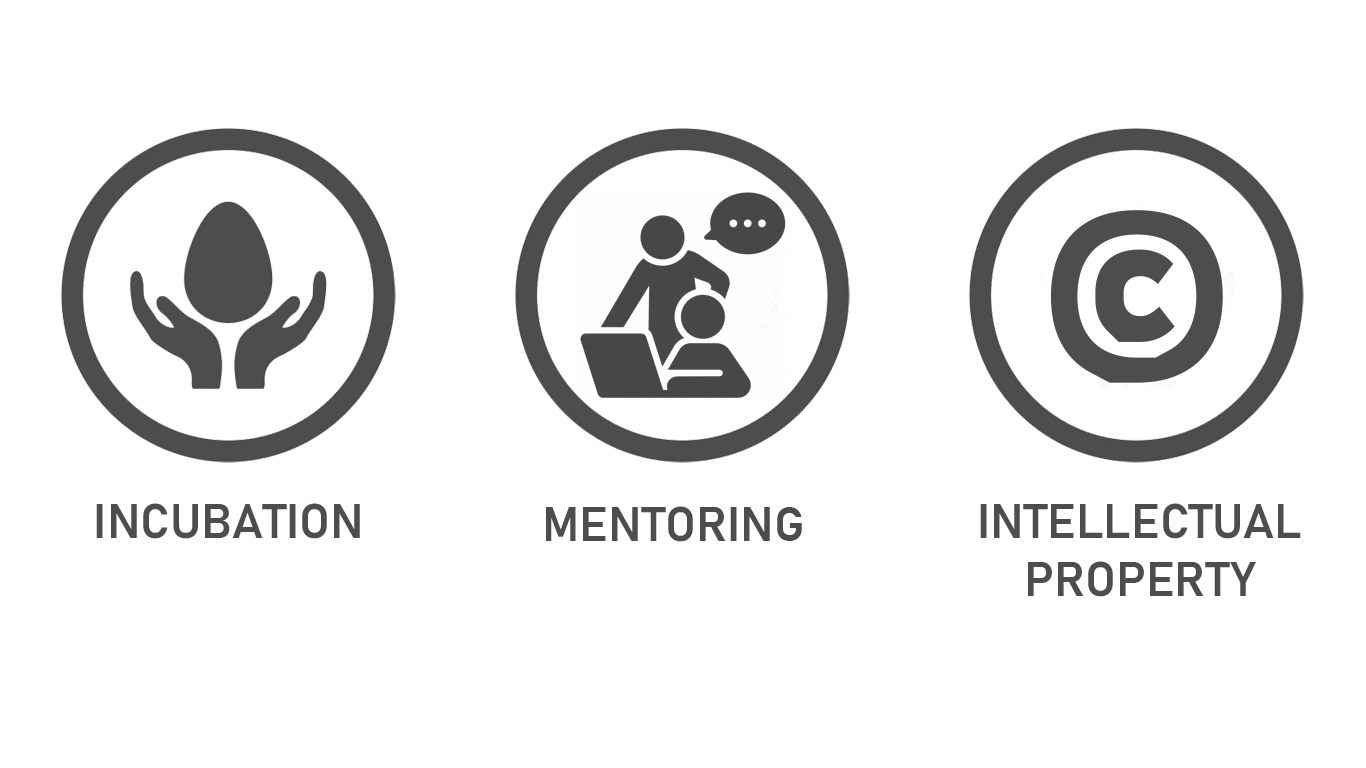
<style>
.page{position:relative;width:1366px;height:768px;background:#ffffff}
.page>*{position:absolute;margin:0}
.t1{font:286px "Bahnschrift-SemiBold";color:#4d4d4d}
.t2{font:48px "Bahnschrift-SemiBold";color:#4d4d4d}
</style>
<div class="page">
<p class="t1" style="left:1050px;top:210px;width:173px;height:173px">©</p>
<p class="t2" style="left:96px;top:503px;width:264px;height:36px">INCUBATION</p>
<p class="t2" style="left:546px;top:506px;width:256px;height:36px">MENTORING</p>
<p class="t2" style="left:980px;top:503px;width:321px;height:94px;text-align:center">INTELLECTUAL PROPERTY</p>
</div>
